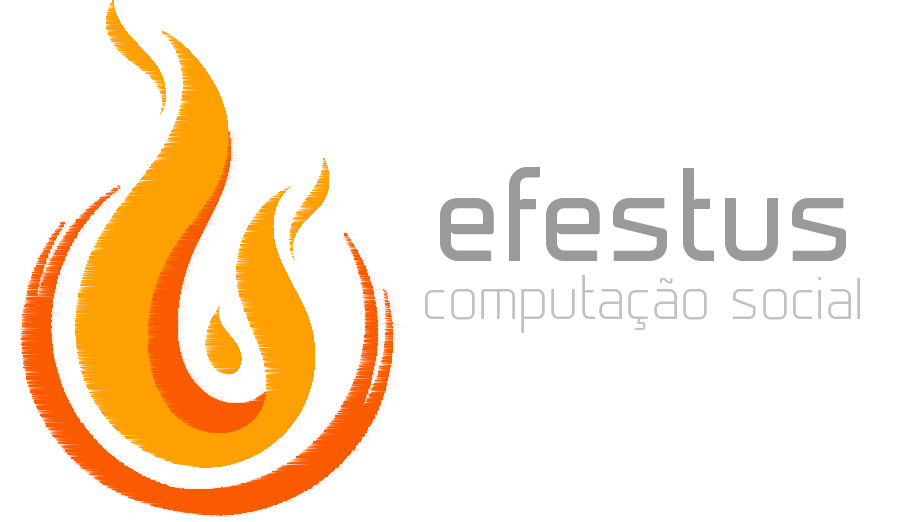
<style>
.page{position:relative;width:922px;height:522px;background:#ffffff}
.page>*{position:absolute;margin:0}
.t1{font:125px "Prime-Regular";color:#9a9a98}
.t2{font:58.3px "Prime-Light";color:#c2c1c1}
</style>
<div class="page">
<p class="t1" style="left:440px;top:166px;width:406px;height:96px">efestus</p>
<p class="t2" style="left:425px;top:275px;width:435px;height:58px">computação social</p>
</div>
